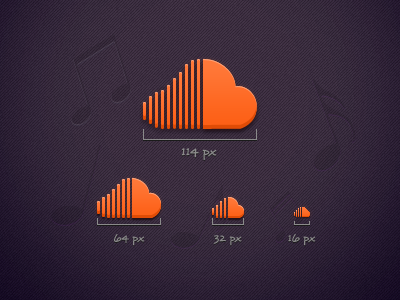
<style>
.page{position:relative;width:400px;height:300px}
.page>*{position:absolute;margin:0}
.t1{font:14px "Desyrel";letter-spacing:-0.02em;color:#8a8a8a}
.t2{font:12px "Desyrel";letter-spacing:-0.02em;color:#8a8a8a}
</style>
<div class="page">
<p class="t1" style="left:181px;top:148px;width:36px;height:12px">114 px</p>
<p class="t2" style="left:114px;top:234px;width:31px;height:12px">64 px</p>
<p class="t2" style="left:213px;top:235px;width:29px;height:11px">32 px</p>
<p class="t2" style="left:288px;top:234px;width:28px;height:12px">16 px</p>
</div>
